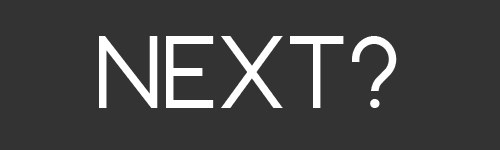
<style>
.page{position:relative;width:500px;height:150px;background:#333333}
.page>*{position:absolute;margin:0}
.t1{font:100px "Neou-Bold";color:#ffffff}
</style>
<div class="page">
<p class="t1" style="left:99px;top:36px;width:298px;height:72px">NEXT?</p>
</div>
